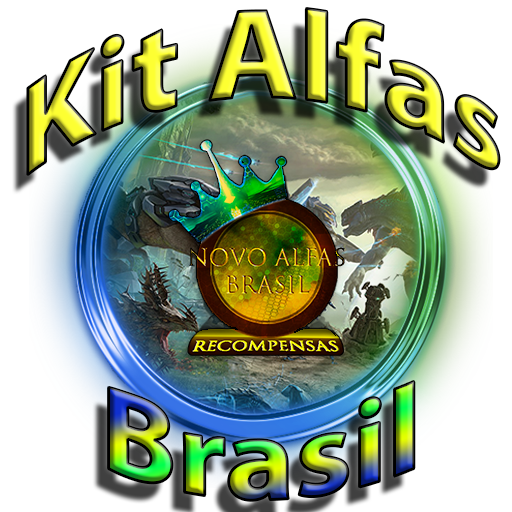
<style>
.page{position:relative;width:512px;height:512px;background:#ffffff}
.page>*{position:absolute;margin:0}
.t1{font:128px "MyriadPro-Bold"}
.t2{font:122px "MyriadPro-Bold"}
</style>
<div class="page">
<p class="t1" style="left:27px;top:8px;width:472px;height:167px">Kit Alfas</p>
<p class="t2" style="left:108px;top:381px;width:306px;height:120px">Brasil</p>
</div>
